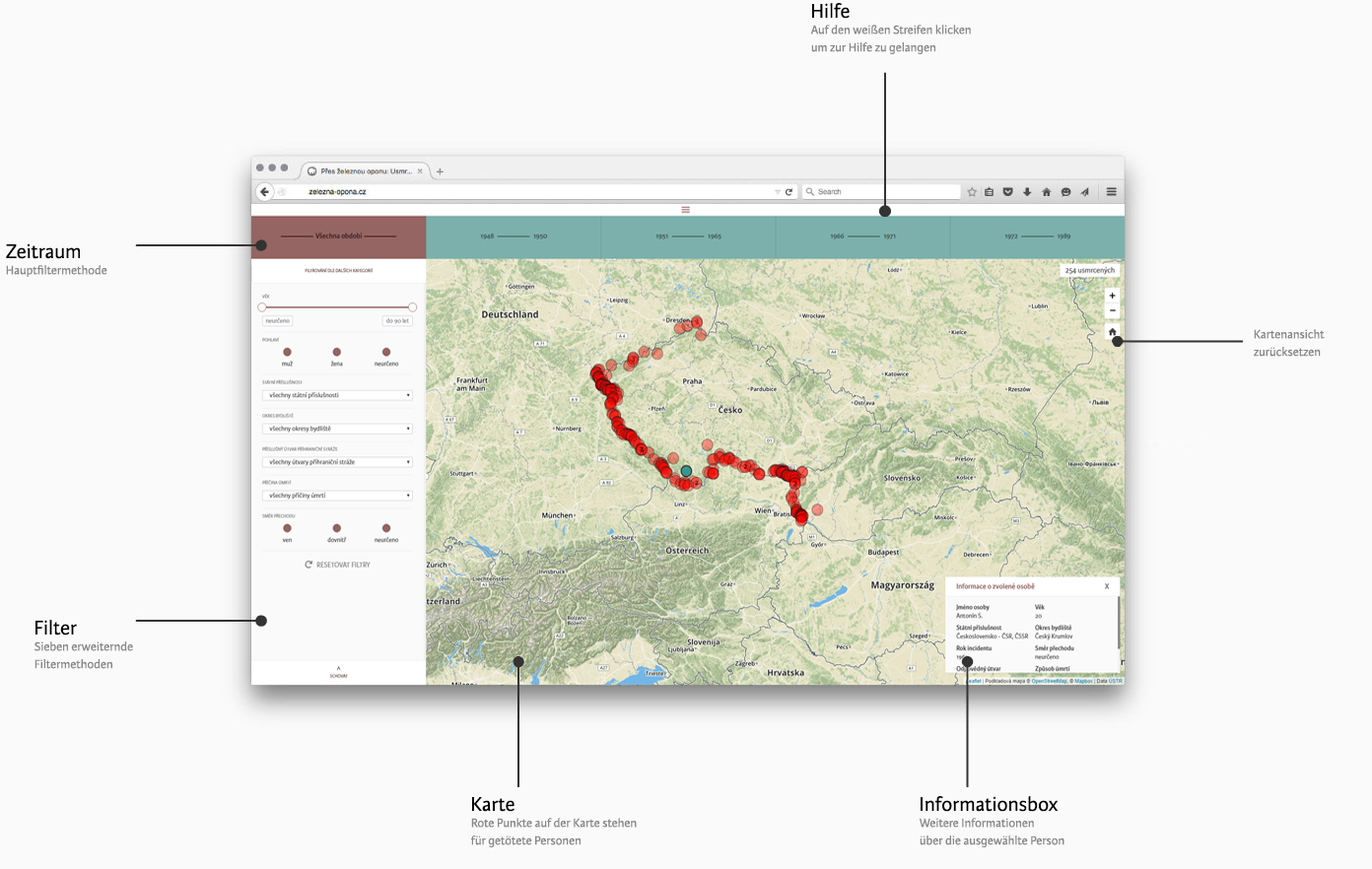
<style>
.page{position:relative;width:1372px;height:869px;background:#fafafa}
.page>*{position:absolute;margin:0}
.t1{font:21px "KarminaSans";color:#000000}
.t2{font:12.8px/17.6px "KarminaSans";color:#888888}
.t3{font:12.8px "KarminaSans";color:#888888}
</style>
<div class="page">
<p class="t1" style="left:812px;top:3px;width:38px;height:16px">Hilfe</p>
<p class="t2" style="left:810px;top:25px;width:161px;height:29px">Auf den weißen Streifen klicken<br>um zur Hilfe zu gelangen</p>
<p class="t1" style="left:6px;top:243px;width:74px;height:16px">Zeitraum</p>
<p class="t3" style="left:6px;top:265px;width:101px;height:12px">Hauptfiltermethode</p>
<p class="t2" style="left:1254px;top:329px;width:71px;height:28px">Kartenansicht<br>zurücksetzen</p>
<p class="t1" style="left:35px;top:620px;width:42px;height:16px">Filter</p>
<p class="t2" style="left:34px;top:642px;width:99px;height:27px">Sieben erweiternde<br>Filtermethoden</p>
<p class="t1" style="left:472px;top:797px;width:42px;height:15px">Karte</p>
<p class="t1" style="left:920px;top:796px;width:138px;height:16px">Informationsbox</p>
<p class="t2" style="left:471px;top:818px;width:166px;height:30px">Rote Punkte auf der Karte stehen<br>für getötete Personen</p>
<p class="t2" style="left:919px;top:818px;width:145px;height:30px">Weitere Informationen<br>über die ausgewählte Person</p>
</div>
